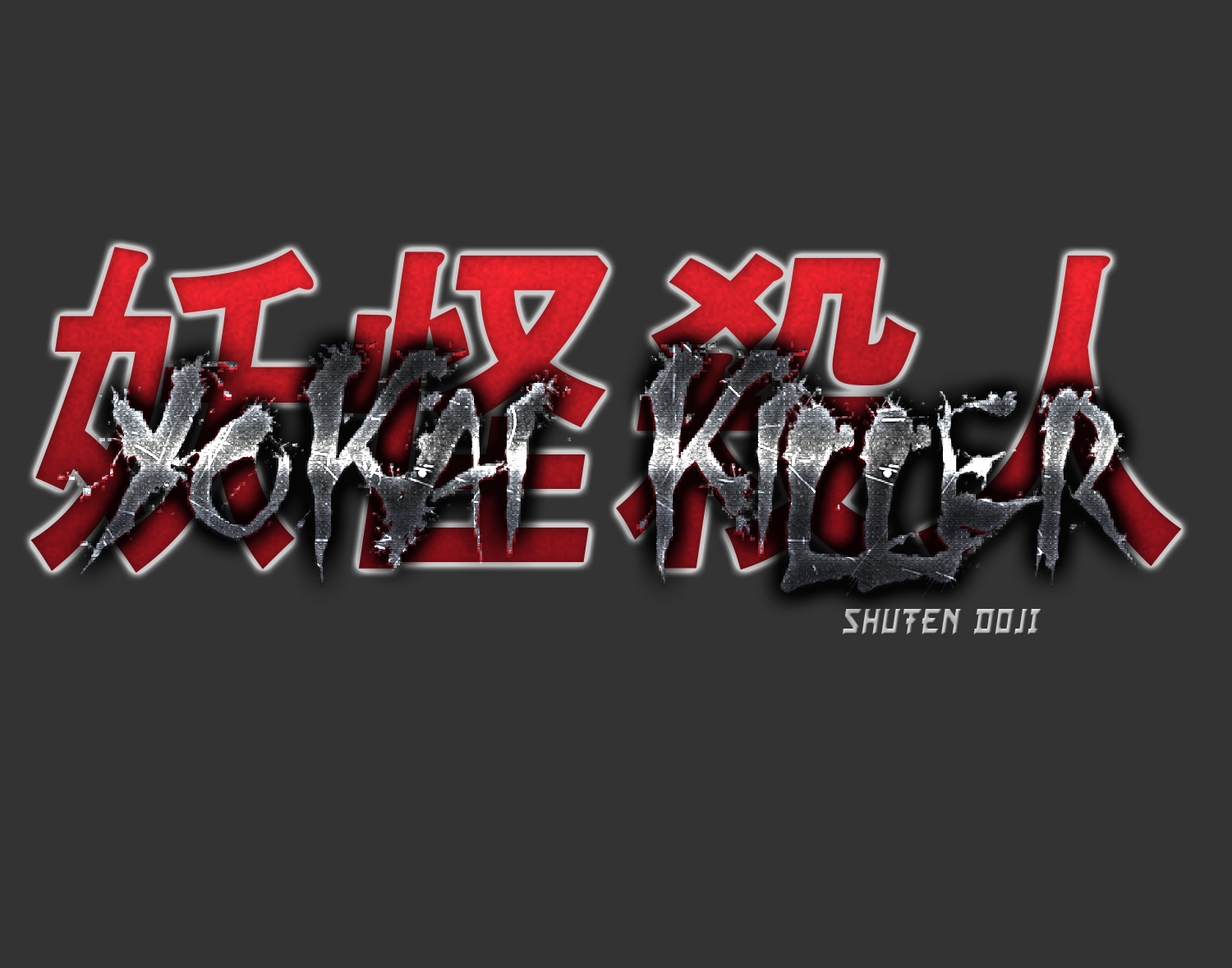
<style>
.page{position:relative;width:1232px;height:968px;background:#333333}
.page>*{position:absolute;margin:0}
.t1{font:238.2px "ShogunsClan";font-style:italic;scale:0.83 1}
.t2{font:59.6px "CFSamuraiBob-Regular";font-style:italic;scale:0.83 1}
</style>
<div class="page">
<p class="t1" style="left:59px;top:340px;width:1082px;height:258px">Yokai  Killer</p>
<p class="t2" style="left:842px;top:609px;width:199px;height:25px">SHUTEN DOJI</p>
</div>
